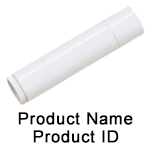
<style>
.page{position:relative;width:150px;height:150px;background:#ffffff}
.page>*{position:absolute;margin:0}
.t1{font:16.4px "ArialMT";letter-spacing:0.03em;color:#000000;font-weight:bold}
</style>
<div class="page">
<p class="t1" style="left:18px;top:112px;width:115px;height:13px">Product Name</p>
<p class="t1" style="left:33px;top:130px;width:86px;height:13px">Product ID</p>
</div>
